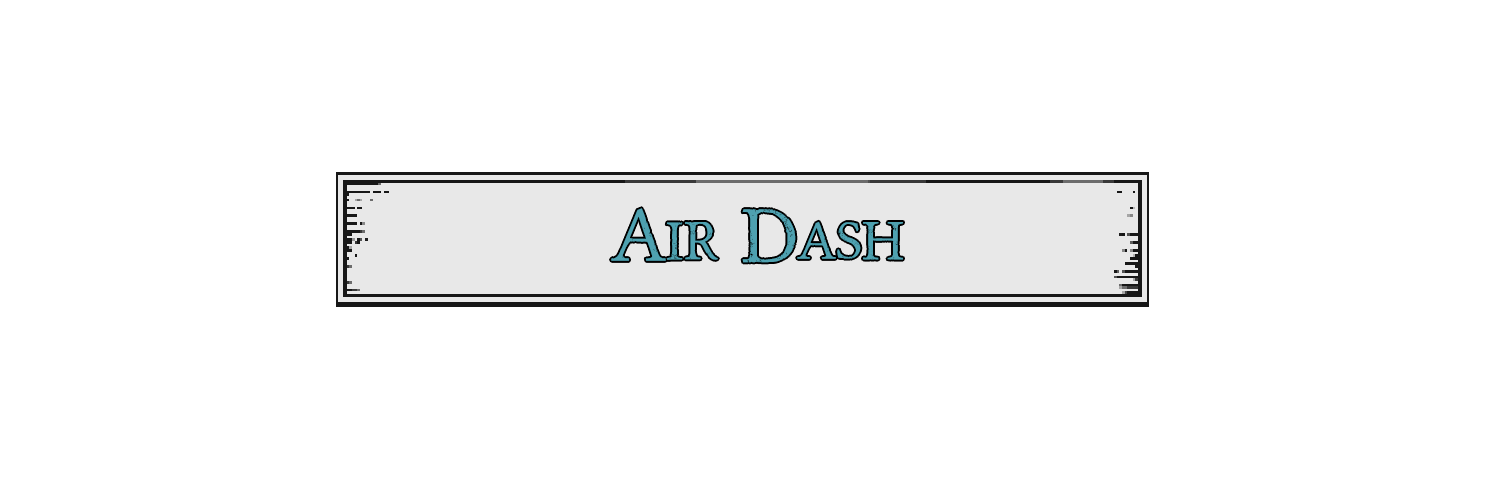
<style>
.page{position:relative;width:1504px;height:498px;background:#ffffff}
.page>*{position:absolute;margin:0}
.t1{font:60px "Portmanteau-Regular";letter-spacing:-0.06em;color:#4ea1b0;font-variant:small-caps}
</style>
<div class="page">
<p class="t1" style="left:611px;top:208px;width:292px;height:55px">Air Dash</p>
</div>
